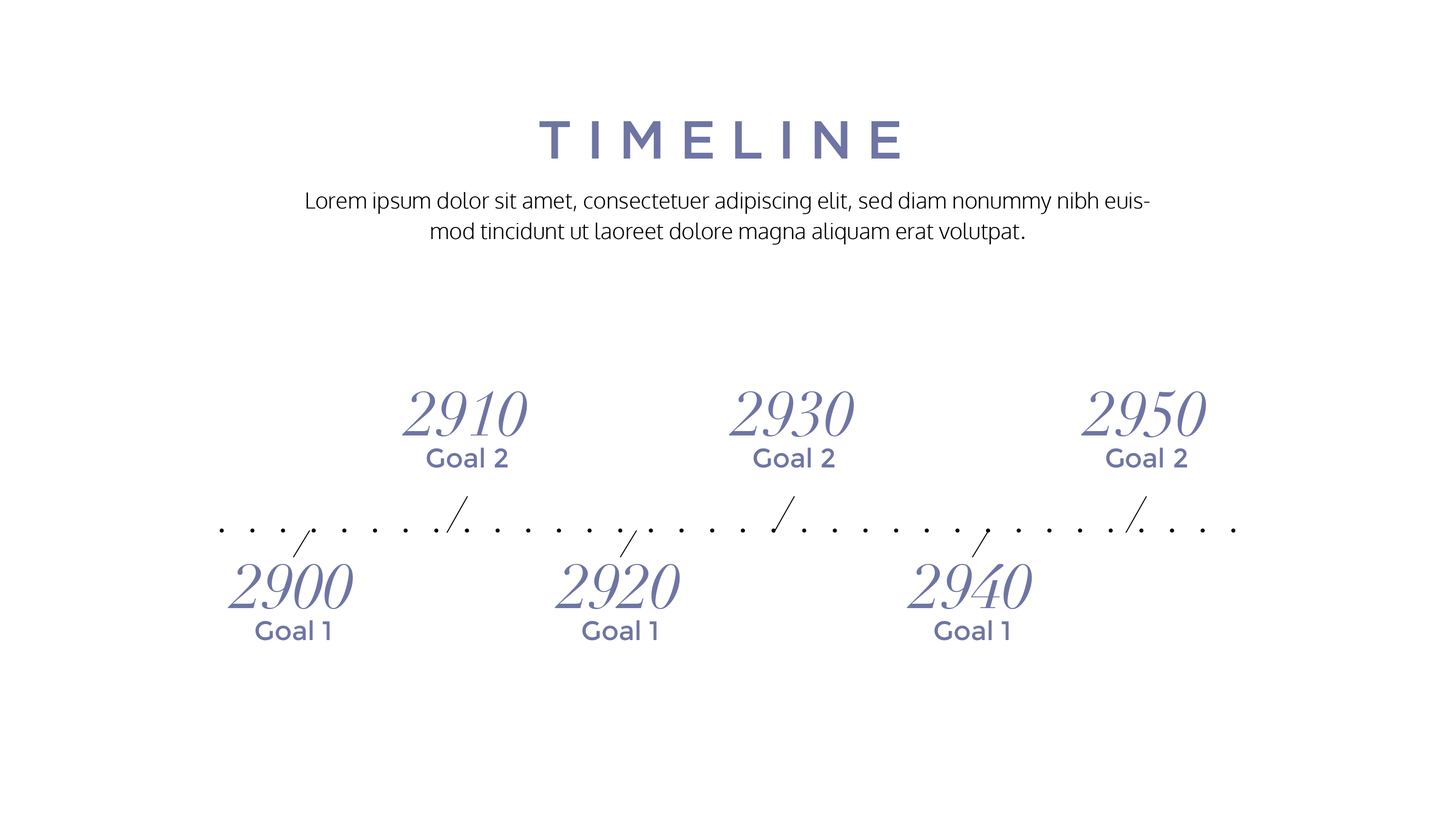
<style>
.page{position:relative;width:1455px;height:819px;background:#ffffff}
.page>*{position:absolute;margin:0}
.t1{font:53.2px "GothamMedium";letter-spacing:0.28em;color:#6f75a3}
.t2{font:22.2px/30.3px "Oxygen-Light";color:#000000}
.t3{font:26.7px "Montserrat-Regular";color:#6f75a3}
.t4{font:62.7px "Didot-Italic";color:#6f75a3}
</style>
<div class="page">
<p class="t1" style="left:539px;top:121px;width:361px;height:38px">TIMELINE</p>
<p class="t2" style="left:307px;top:192px;width:843px;height:53px;text-align:center">Lorem ipsum dolor sit amet, consectetuer adipiscing elit, sed diam nonummy nibh euismod tincidunt ut laoreet dolore magna aliquam erat volutpat.</p>
<p class="t3" style="left:402px;top:391px;width:125px;height:77px;text-align:center"><span class="t4">2910<br></span>Goal 2</p>
<p class="t3" style="left:729px;top:391px;width:125px;height:77px;text-align:center"><span class="t4">2930<br></span>Goal 2</p>
<p class="t3" style="left:1081px;top:391px;width:125px;height:77px;text-align:center"><span class="t4">2950<br></span>Goal 2</p>
<p class="t3" style="left:228px;top:564px;width:125px;height:77px;text-align:center"><span class="t4">2900<br></span>Goal 1</p>
<p class="t3" style="left:555px;top:564px;width:125px;height:77px;text-align:center"><span class="t4">2920<br></span>Goal 1</p>
<p class="t3" style="left:907px;top:564px;width:125px;height:77px;text-align:center"><span class="t4">2940<br></span>Goal 1</p>
</div>
